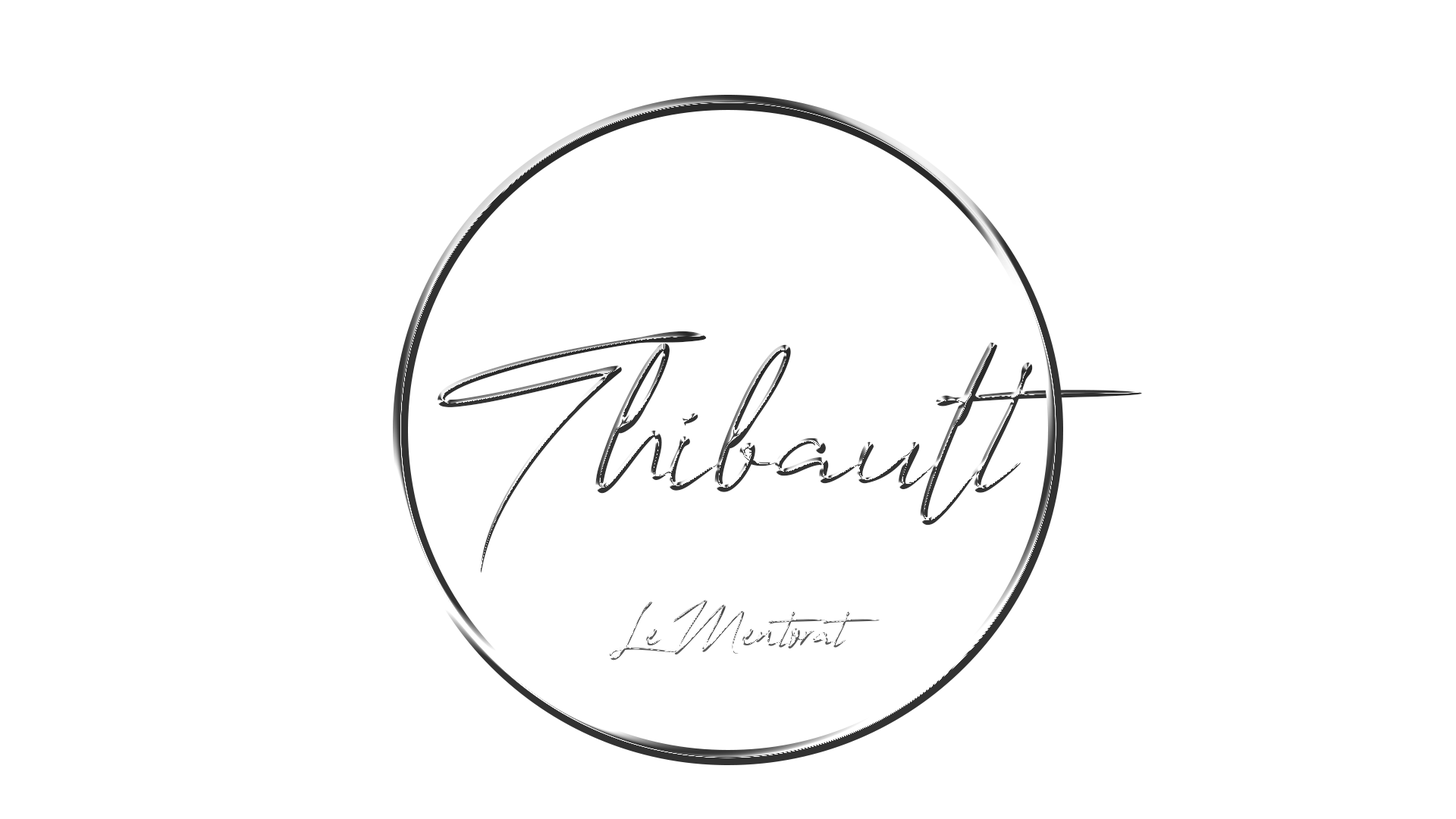
<style>
.page{position:relative;width:1456px;height:819px;background:#ffffff}
.page>*{position:absolute;margin:0}
.t1{font:289.6px "OneSignature"}
.t2{font:79px "OneSignature"}
</style>
<div class="page">
<p class="t1" style="left:438px;top:331px;width:704px;height:242px">Thibault</p>
<p class="t2" style="left:610px;top:600px;width:270px;height:60px">Le Mentorat</p>
</div>
